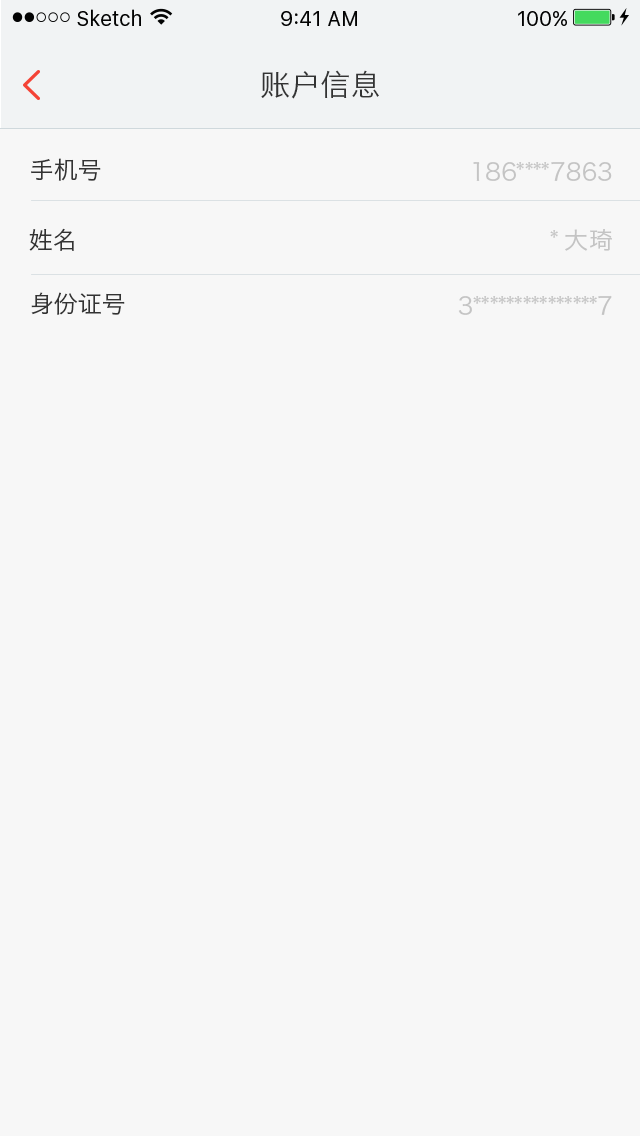
<style>
.page{position:relative;width:640px;height:1136px;background:#f7f7f7}
.page>*{position:absolute;margin:0}
.t1{font:30px "HiraginoSansGB-W3";color:#333333}
.t2{font:24px "HiraginoSansGB-W3";color:#333333}
.t3{font:24px "HiraginoSansGB-W3";color:#c4c4c4}
</style>
<div class="page">
<p class="t1" style="left:261px;top:70px;width:118px;height:29px">账户信息</p>
<p class="t2" style="left:31px;top:158px;width:70px;height:23px">手机号</p>
<p class="t3" style="left:473px;top:161px;width:139px;height:20px">186****7863</p>
<p class="t2" style="left:29px;top:228px;width:45px;height:23px">姓名</p>
<p class="t3" style="left:550px;top:229px;width:62px;height:22px">*大琦</p>
<p class="t2" style="left:31px;top:292px;width:94px;height:23px">身份证号</p>
<p class="t3" style="left:458px;top:295px;width:154px;height:20px">3***************7</p>
</div>
